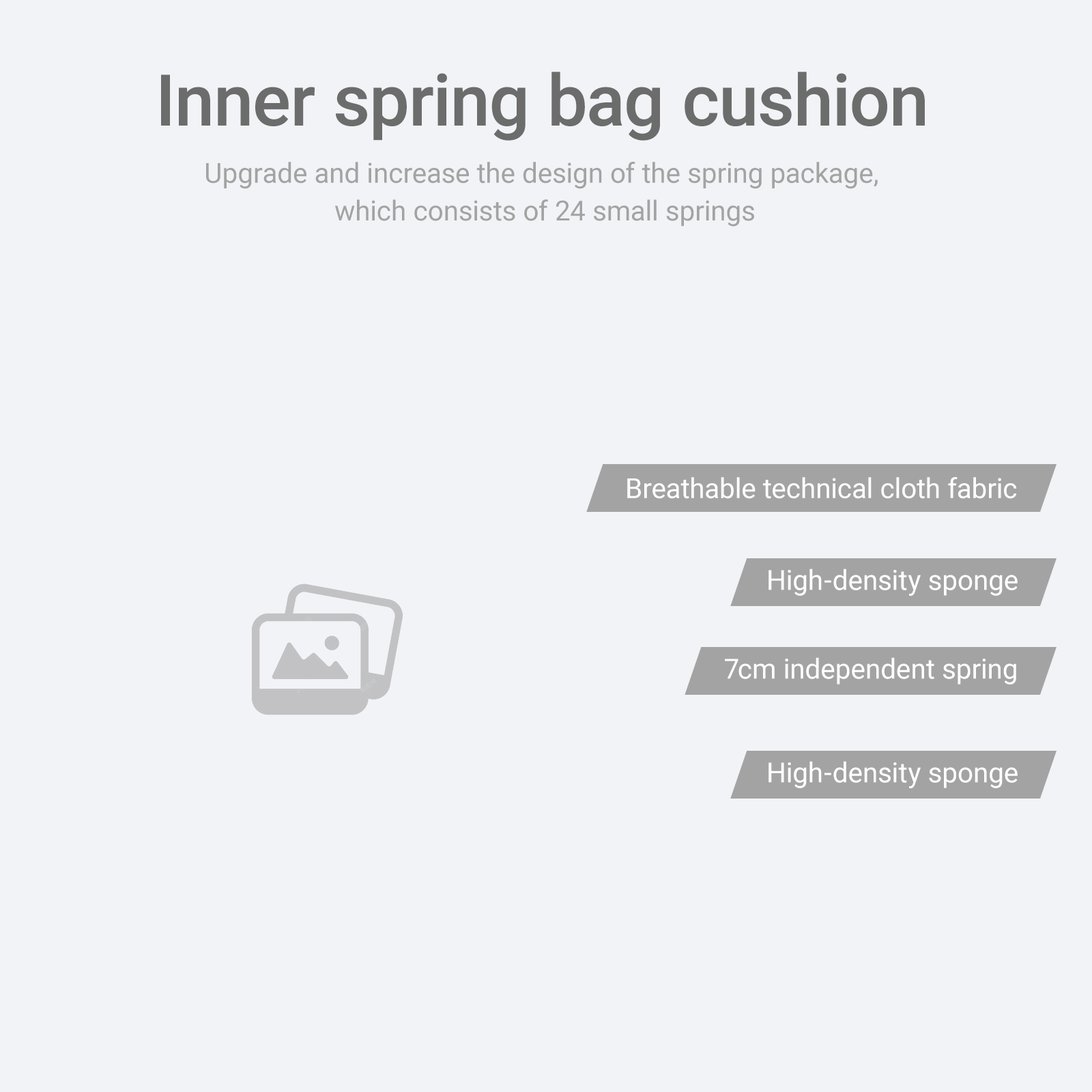
<style>
.page{position:relative;width:1092px;height:1092px;background:#f2f3f6}
.page>*{position:absolute;margin:0}
.t1{font:71.3px "Roboto-Medium";color:#6c6c6c}
.t2{font:27.7px/37.9px "Roboto-Regular";color:#a3a3a3}
.t3{font:27.7px "Roboto-Regular";color:#ffffff}
</style>
<div class="page">
<p class="t1" style="left:161px;top:72px;width:764px;height:69px">Inner spring bag cushion</p>
<p class="t2" style="left:206px;top:162px;width:672px;height:65px;text-align:center">Upgrade and increase the design of the spring package, <br>which consists of 24 small springs</p>
<p class="t3" style="left:627px;top:477px;width:390px;height:22px">Breathable technical cloth fabric</p>
<p class="t3" style="left:768px;top:569px;width:250px;height:27px">High-density sponge</p>
<p class="t3" style="left:725px;top:657px;width:291px;height:28px">7cm independent spring</p>
<p class="t3" style="left:768px;top:761px;width:250px;height:27px">High-density sponge</p>
</div>
